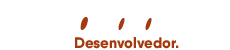
<style>
.page{position:relative;width:230px;height:50px;background:#ffffff}
.page>*{position:absolute;margin:0}
.t1{font:15.2px "QanelasSoftDEMO-ExtraBold";color:#a6380d}
</style>
<div class="page">
<p class="t1" style="left:75px;top:37px;width:104px;height:12px">Desenvolvedor.</p>
</div>
